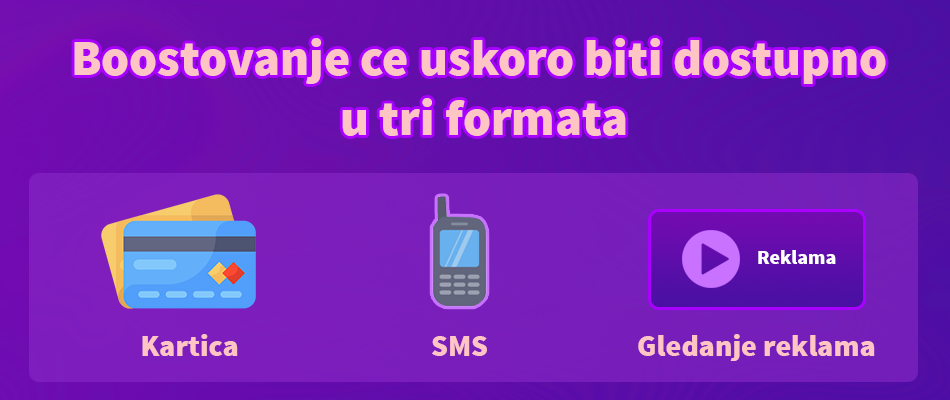
<style>
.page{position:relative;width:950px;height:400px}
.page>*{position:absolute;margin:0}
.t1{font:50px "SourceSansPro-Black";color:#ffc5c5}
.t2{font:20px "SourceSansPro-Black";color:#ffffff}
.t3{font:30.2px "SourceSansPro-Black";color:#ffc5c5}
.t4{font:30px "SourceSansPro-Black";color:#ffc5c5}
</style>
<div class="page">
<p class="t1" style="left:74px;top:38px;width:812px;height:98px;text-align:center">Boostovanje ce uskoro biti dostupno<br> u tri formata</p>
<p class="t2" style="left:758px;top:250px;width:78px;height:14px">Reklama</p>
<p class="t3" style="left:142px;top:334px;width:96px;height:22px">Kartica</p>
<p class="t4" style="left:432px;top:336px;width:55px;height:20px">SMS</p>
<p class="t4" style="left:638px;top:334px;width:237px;height:27px">Gledanje reklama</p>
</div>
